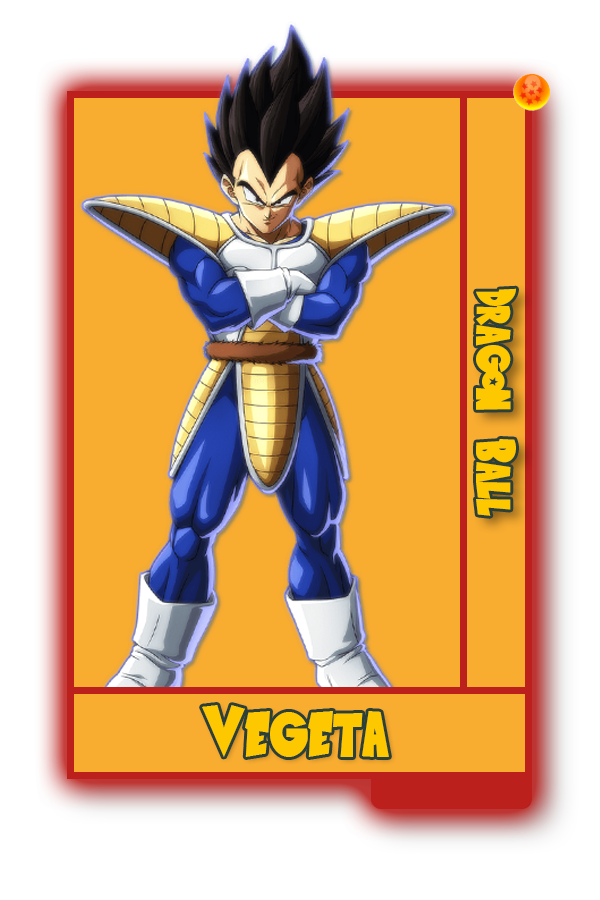
<style>
.page{position:relative;width:600px;height:900px;background:#f8ac30}
.page>*{position:absolute;margin:0}
.t1{font:56.9px "SaiyanSans";color:#fec800}
.t2{font:75px "SaiyanSans";color:#fec800}
</style>
<div class="page">
<p class="t1" style="left:476px;top:288px;width:40px;height:228px;rotate:90deg">Dragon Ball</p>
<p class="t2" style="left:202px;top:705px;width:187px;height:52px">Vegeta</p>
</div>
